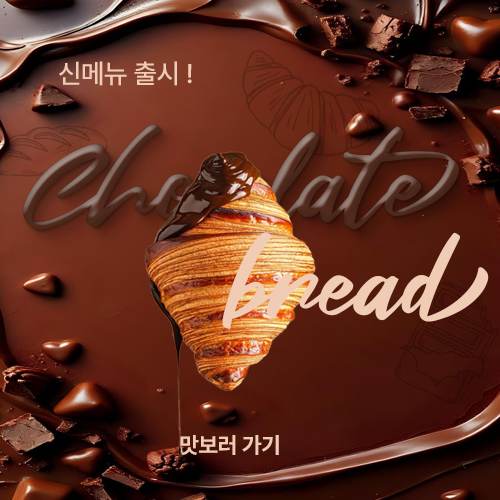
<style>
.page{position:relative;width:500px;height:500px}
.page>*{position:absolute;margin:0}
.t1{font:27px "Pretendard-Medium";letter-spacing:-0.01em;color:#f0ccb4}
.t2{font:105px "Fair-Prosper";letter-spacing:-0.01em;color:#f0ccb4}
.t3{font:22.5px "Pretendard-Bold";letter-spacing:-0.01em;color:#f0ccb4}
</style>
<div class="page">
<p class="t1" style="left:59px;top:61px;width:133px;height:25px">신메뉴 출시 !</p>
<p class="t2" style="left:222px;top:232px;width:267px;height:97px">bread</p>
<p class="t3" style="left:180px;top:435px;width:99px;height:20px">맛보러 가기</p>
</div>
